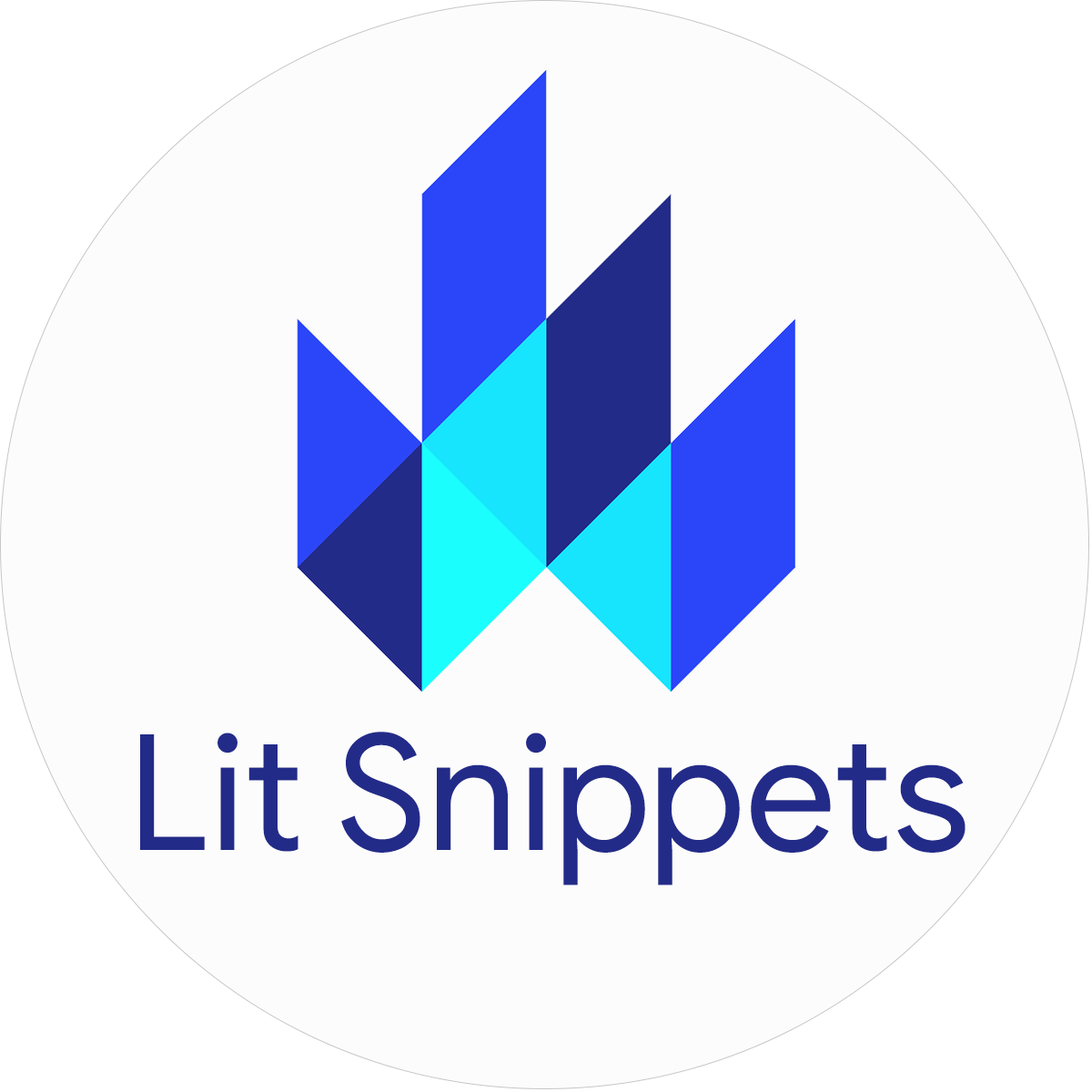
<style>
.page{position:relative;width:1092px;height:1092px;background:#fcfcfc}
.page>*{position:absolute;margin:0}
.t1{font:161.2px "GoogleSans-Regular";color:#232b89}
</style>
<div class="page">
<p class="t1" style="left:140px;top:732px;width:825px;height:153px">Lit Snippets</p>
</div>
